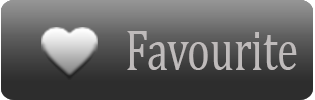
<style>
.page{position:relative;width:315px;height:100px}
.page>*{position:absolute;margin:0}
.t1{font:58.3px "Cambria";color:#bfbbbb;scale:0.73 1}
</style>
<div class="page">
<p class="t1" style="left:127px;top:31px;width:170px;height:39px">Favourite</p>
</div>
